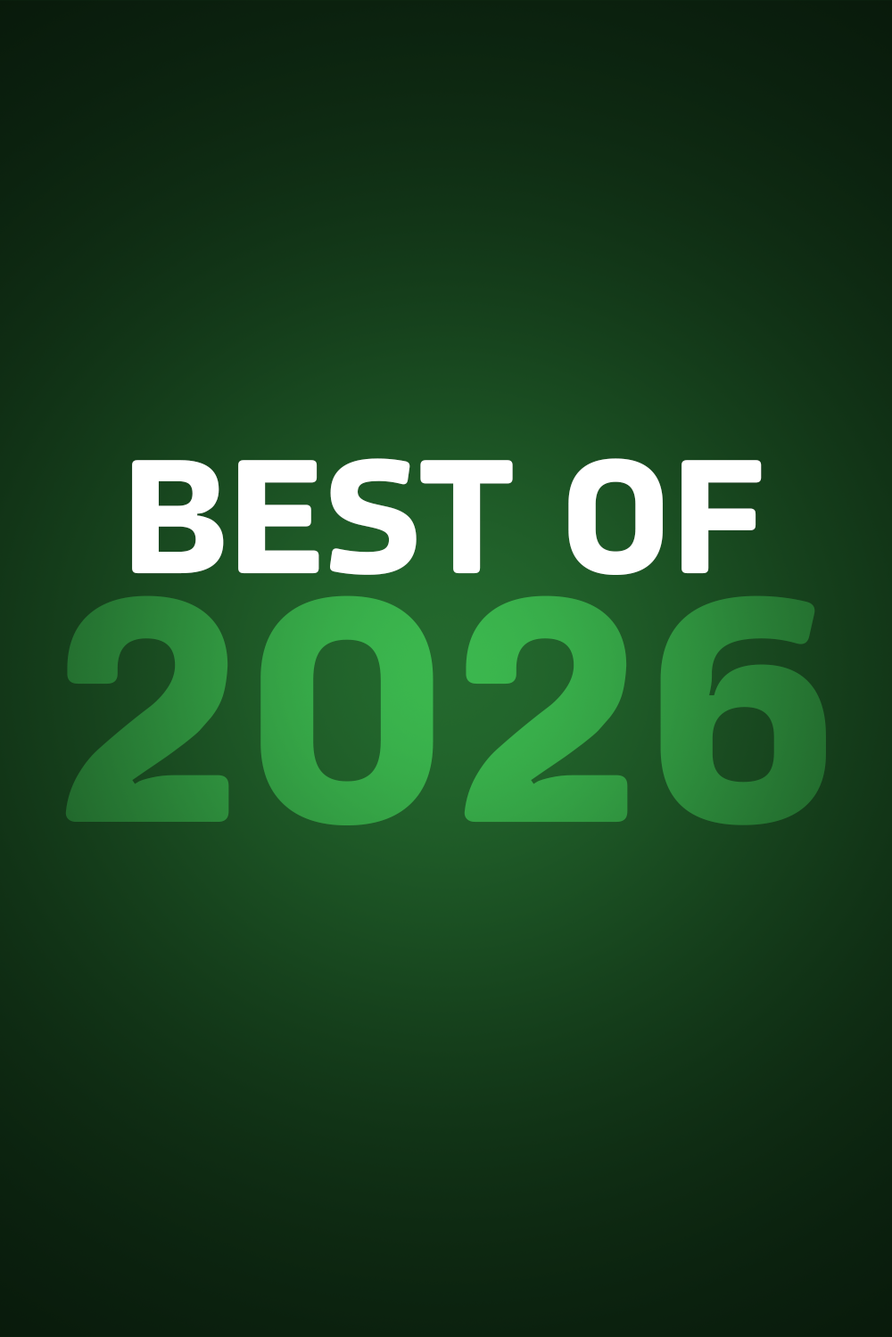
<style>
.page{position:relative;width:892px;height:1337px}
.page>*{position:absolute;margin:0}
.t1{font:161.8px "Amfibia-Bold";color:#ffffff;scale:1.03 1}
.t2{font:323.6px "Amfibia-Bold";scale:1.03 1}
</style>
<div class="page">
<p class="t1" style="left:132px;top:458px;width:629px;height:117px">BEST OF</p>
<p class="t2" style="left:65px;top:596px;width:761px;height:230px">2026</p>
</div>
